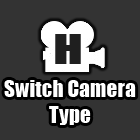
<style>
.page{position:relative;width:140px;height:140px;background:#333333}
.page>*{position:absolute;margin:0}
.t1{font:38.5px "Impact";color:#1f1f1f;scale:1.41 1}
.t2{font:21.5px "Impact";color:#ffffff}
</style>
<div class="page">
<p class="t1" style="left:55px;top:34px;width:26px;height:30px">H</p>
<p class="t2" style="left:4px;top:80px;width:132px;height:45px;text-align:center">Switch Camera<br>Type</p>
</div>
